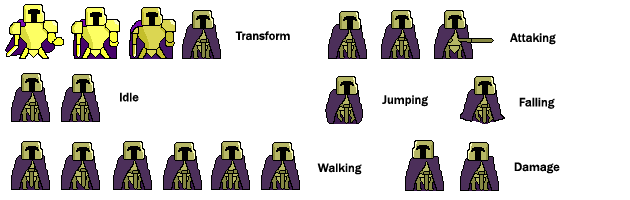
<style>
.page{position:relative;width:630px;height:200px;background:#ffffff}
.page>*{position:absolute;margin:0}
.t1{font:12.5px "FranklinGothic-Medium";color:#000000}
</style>
<div class="page">
<p class="t1" style="left:235px;top:31px;width:55px;height:10px">Transform</p>
<p class="t1" style="left:510px;top:33px;width:46px;height:12px">Attaking</p>
<p class="t1" style="left:120px;top:92px;width:19px;height:10px">Idle</p>
<p class="t1" style="left:382px;top:95px;width:46px;height:12px">Jumping</p>
<p class="t1" style="left:519px;top:97px;width:36px;height:12px">Falling</p>
<p class="t1" style="left:317px;top:163px;width:45px;height:12px">Walking</p>
<p class="t1" style="left:514px;top:162px;width:46px;height:12px">Damage</p>
</div>
